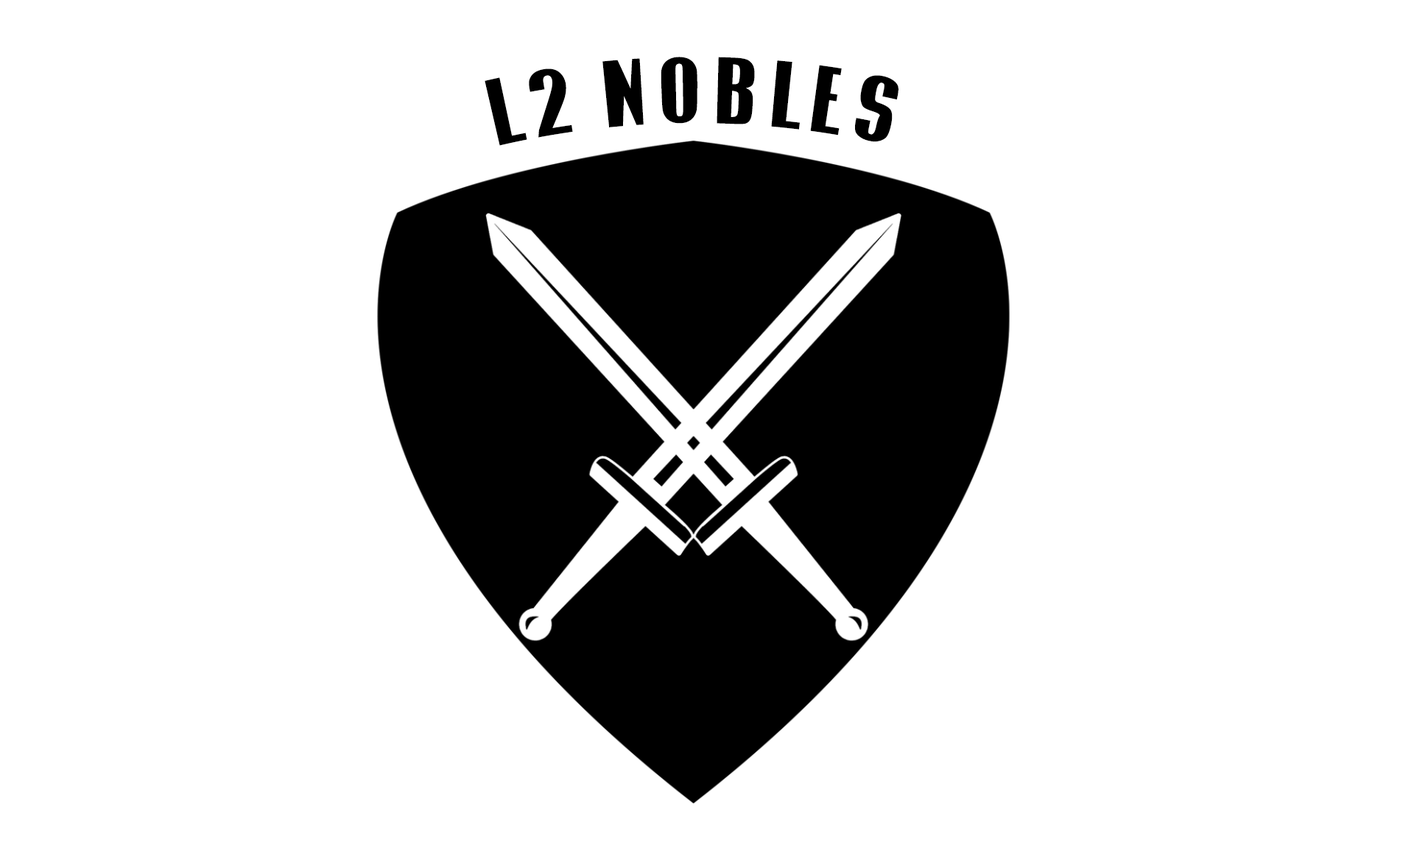
<style>
.page{position:relative;width:1414px;height:843px;background:#ffffff}
.page>*{position:absolute;margin:0}
.t1{font:85.9px "Impact";letter-spacing:0.06em;color:#000000}
</style>
<div class="page">
<p class="t1" style="left:485px;top:57px;width:414px;height:89px">L2 NOBLES</p>
</div>
